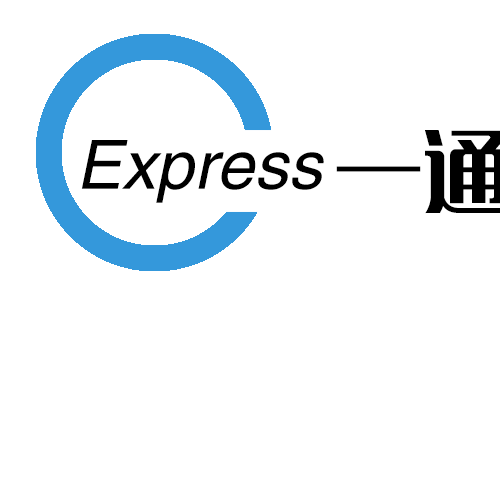
<style>
.page{position:relative;width:500px;height:500px;background:#ffffff}
.page>*{position:absolute;margin:0}
.t1{font:68px "Helvetica-Oblique";color:#000000}
</style>
<div class="page">
<p class="t1" style="left:81px;top:140px;width:243px;height:63px">Express</p>
</div>
